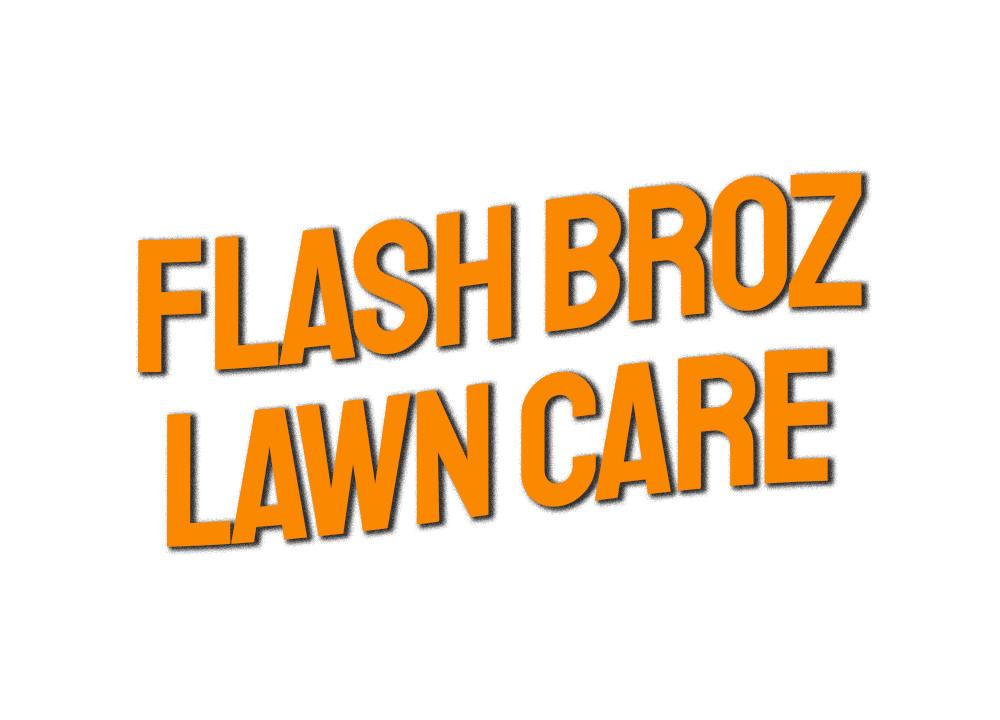
<style>
.page{position:relative;width:1000px;height:720px;background:#ffffff}
.page>*{position:absolute;margin:0}
.t1{font:190px/175px "Staatliches-Regular";letter-spacing:-0.025em;color:#fa8800}
</style>
<div class="page">
<p class="t1" style="left:138px;top:173px;width:724px;height:374px;text-align:center">FLASH BROZ<br>Lawn Care</p>
</div>
